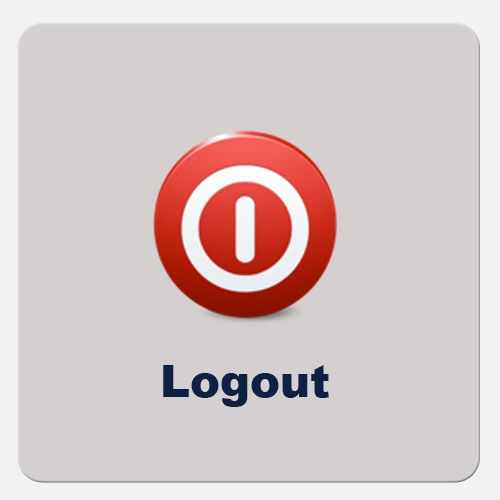
<style>
.page{position:relative;width:500px;height:500px;background:#d4d0d0}
.page>*{position:absolute;margin:0}
.t1{font:45px "Arial-Black";color:#0e2144}
</style>
<div class="page">
<p class="t1" style="left:163px;top:365px;width:166px;height:42px">Logout</p>
</div>
